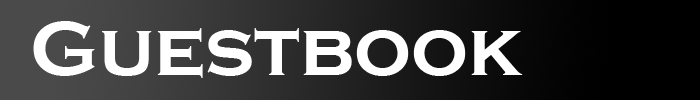
<style>
.page{position:relative;width:700px;height:100px}
.page>*{position:absolute;margin:0}
.t1{font:80px "CopperplateGothic-Bold";color:#ffffff}
</style>
<div class="page">
<p class="t1" style="left:33px;top:21px;width:490px;height:57px">Guestbook</p>
</div>
